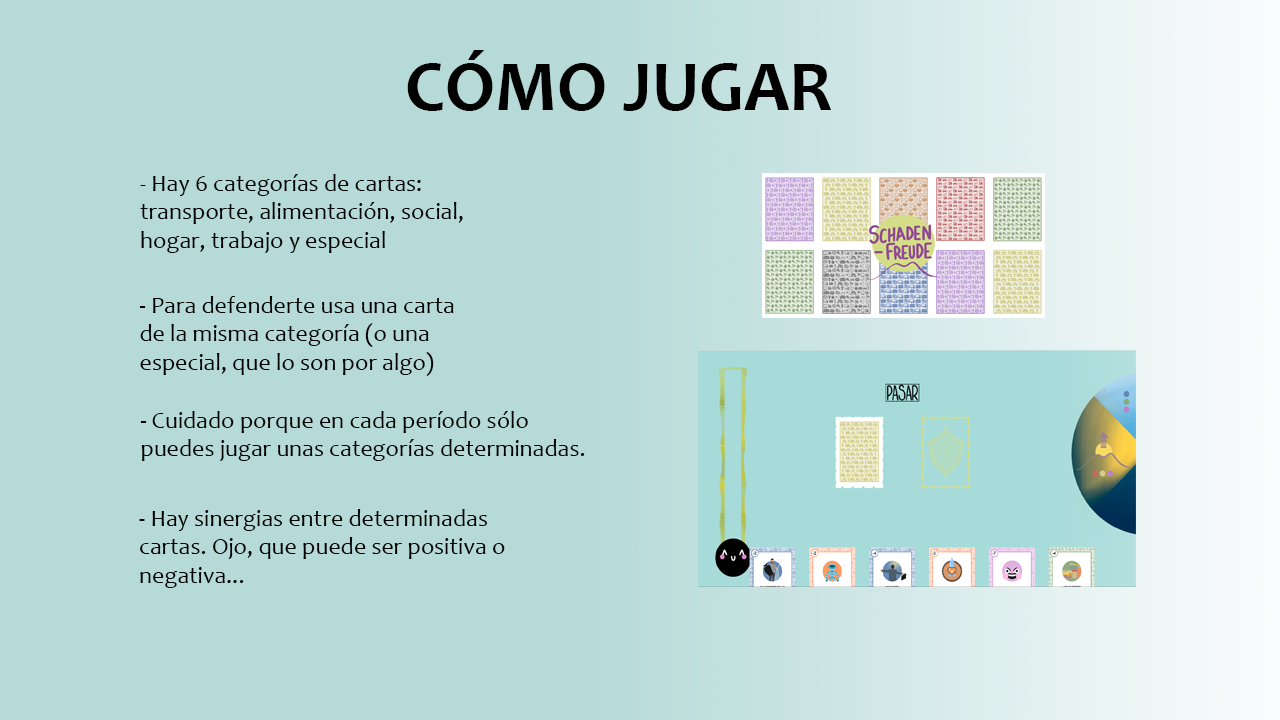
<style>
.page{position:relative;width:1280px;height:720px;background:#b6dad8}
.page>*{position:absolute;margin:0}
.t1{font:72px "Candara-Bold";color:#000000}
.t2{font:24px "Candara";color:#000000}
.t3{font:24px "Candara-Italic";color:#000000}
</style>
<div class="page">
<p class="t1" style="left:407px;top:50px;width:424px;height:61px">CÓMO JUGAR</p>
<p class="t2" style="left:140px;top:174px;width:323px;height:79px"><span class="t3">- </span>Hay 6 categorías de cartas: transporte, alimentación, social, hogar, trabajo y especial</p>
<p class="t2" style="left:139px;top:296px;width:315px;height:80px">- Para defenderte usa una carta de la misma categoría (o una especial, que lo son por algo)</p>
<p class="t2" style="left:140px;top:411px;width:445px;height:50px">- Cuidado porque en cada período sólo puedes jugar unas categorías determinadas.</p>
<p class="t2" style="left:139px;top:509px;width:366px;height:79px">- Hay sinergias entre determinadas cartas. Ojo, que puede ser positiva o negativa...</p>
</div>
